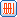
<style>
.page{position:relative;width:17px;height:17px;background:#ffffff}
.page>*{position:absolute;margin:0}
.t1{font:12px "SimSun";color:#ffffff}
.t2{font:12px "SimSun";color:#ff450c}
</style>
<div class="page">
<p class="t1" style="left:2px;top:3px;width:11px;height:11px">删</p>
<p class="t2" style="left:3px;top:3px;width:11px;height:11px">删</p>
</div>
